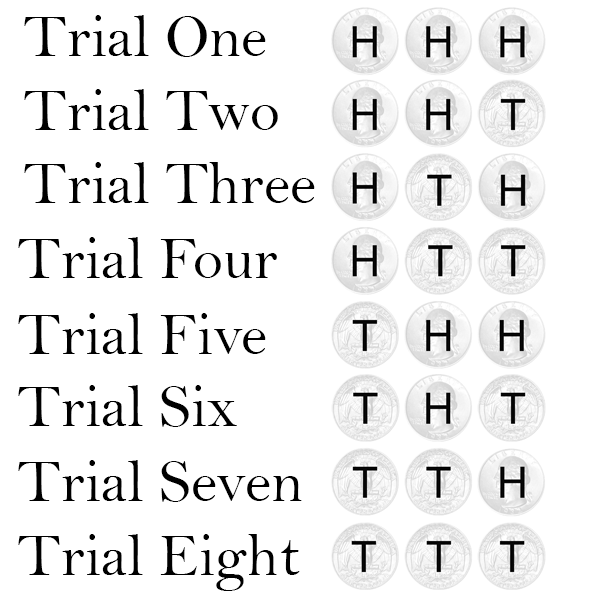
<style>
.page{position:relative;width:600px;height:600px;background:#ffffff}
.page>*{position:absolute;margin:0}
.t1{font:60.5px "BellMT";color:#000000}
</style>
<div class="page">
<p class="t1" style="left:24px;top:15px;width:242px;height:42px">Trial One</p>
<p class="t1" style="left:24px;top:89px;width:254px;height:41px">Trial Two</p>
<p class="t1" style="left:24px;top:162px;width:291px;height:41px">Trial Three</p>
<p class="t1" style="left:18px;top:237px;width:259px;height:41px">Trial Four</p>
<p class="t1" style="left:18px;top:313px;width:248px;height:41px">Trial Five</p>
<p class="t1" style="left:18px;top:385px;width:219px;height:42px">Trial Six</p>
<p class="t1" style="left:18px;top:460px;width:284px;height:42px">Trial Seven</p>
<p class="t1" style="left:18px;top:534px;width:282px;height:57px">Trial Eight</p>
</div>
